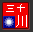
<style>
.page{position:relative;width:33px;height:32px;background:#f20000}
.page>*{position:absolute;margin:0}
.t1{font:10.4px "SimSun";color:#ffffff}
.t2{font:11.7px "SimSun";color:#ffffff}
</style>
<div class="page">
<p class="t1" style="left:6px;top:4px;width:19px;height:8px">三十</p>
<p class="t2" style="left:16px;top:15px;width:11px;height:12px">川</p>
</div>
